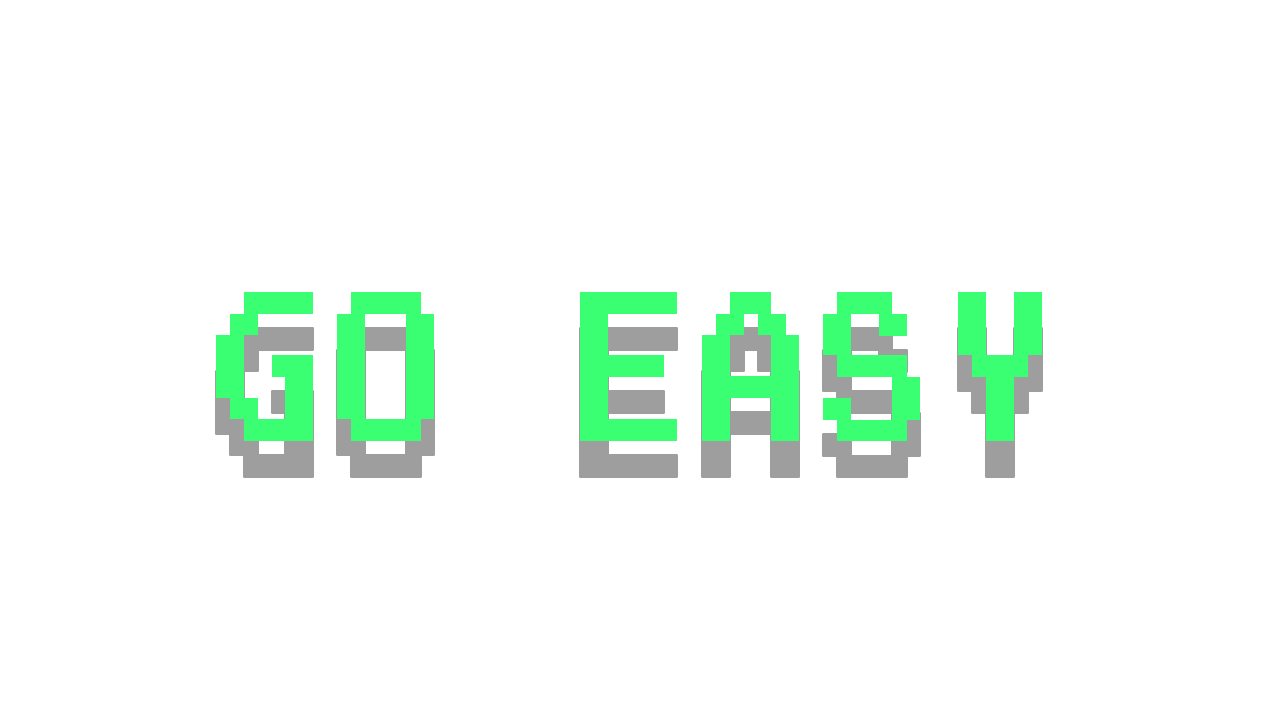
<style>
.page{position:relative;width:1280px;height:720px;background:#ffffff}
.page>*{position:absolute;margin:0}
.t1{font:175.1px "ArcadeNormal";letter-spacing:0.1em;color:#3bff72;scale:0.65 1}
</style>
<div class="page">
<p class="t1" style="left:216px;top:292px;width:826px;height:149px">GO EASY</p>
</div>
